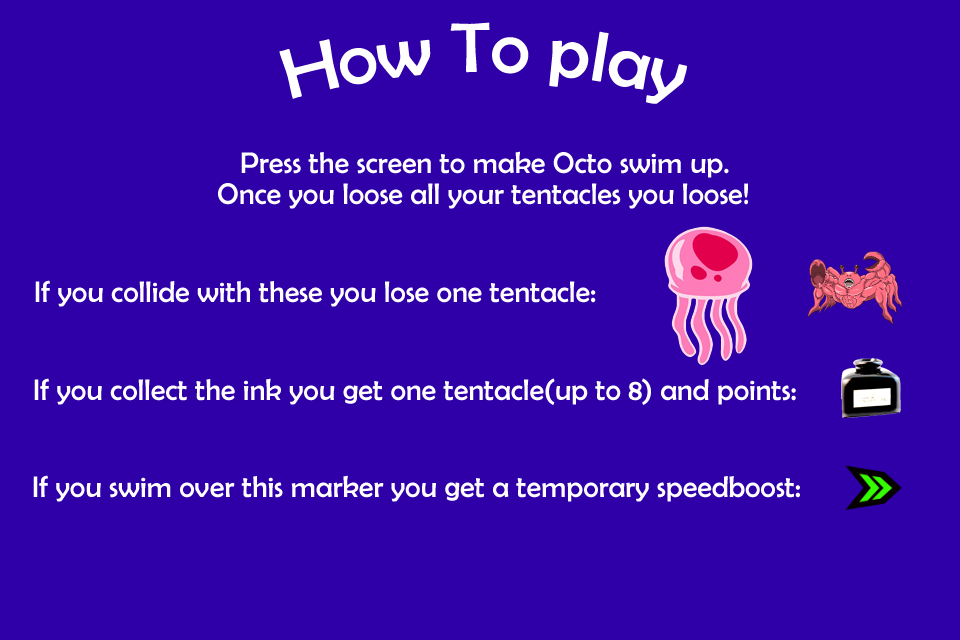
<style>
.page{position:relative;width:960px;height:640px;background:#2f00a7}
.page>*{position:absolute;margin:0}
.t1{font:72px "BerlinSansFB-Reg";color:#ffffff}
.t2{font:30px "BerlinSansFB-Reg";color:#ffffff}
</style>
<div class="page">
<p class="t1" style="left:279px;top:22px;width:408px;height:82px">How To play</p>
<p class="t2" style="left:241px;top:151px;width:488px;height:27px">Press the screen to make Octo swim up.</p>
<p class="t2" style="left:218px;top:183px;width:530px;height:26px">Once you loose all your tentacles you loose!</p>
<p class="t2" style="left:35px;top:280px;width:561px;height:27px">If you collide with these you lose one tentacle:</p>
<p class="t2" style="left:34px;top:378px;width:762px;height:27px">If you collect the ink you get one tentacle(up to 8) and points:</p>
<p class="t2" style="left:33px;top:475px;width:767px;height:27px">If you swim over this marker you get a temporary speedboost:</p>
</div>
